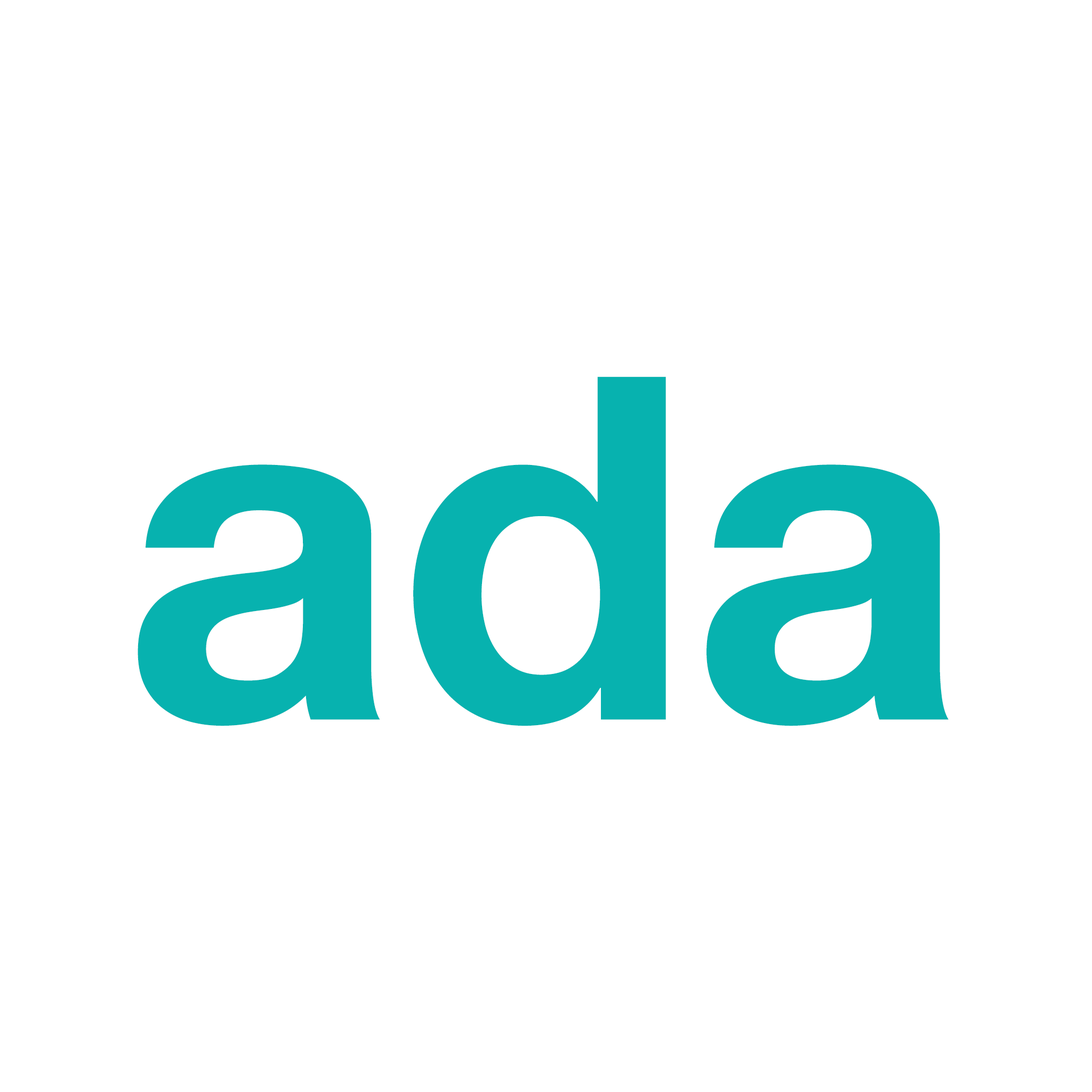
<style>
.page{position:relative;width:1092px;height:1092px;background:#ffffff}
.page>*{position:absolute;margin:0}
.t1{font:479.9px "HelveticaNeue-Bold";color:#07b2af}
</style>
<div class="page">
<p class="t1" style="left:138px;top:376px;width:811px;height:350px">ada</p>
</div>
